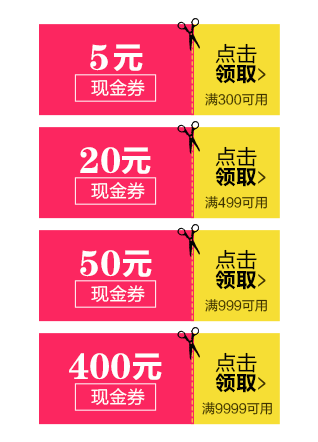
<style>
.page{position:relative;width:318px;height:442px;background:#ffffff}
.page>*{position:absolute;margin:0}
.t1{font:7px "FZLTHJW--GB1-0";letter-spacing:0.2em}
.t2{font:36.9px "FZCSJW--GB1-0";color:#fefefd}
.t3{font:31px "FZLTCHJW--GB1-0";color:#fefefd}
.t4{font:21.1px "FZLTHK--GBK1-0";color:#040404}
.t5{font:21.1px "FZLTCHJW--GB1-0";color:#010101}
.t6{font:18px "FZLTHK--GBK1-0";color:#fefefd}
.t7{font:13px "FZLTHK--GBK1-0";color:#3f3301}
</style>
<div class="page">
<p class="t1" style="left:191px;top:25px;width:2px;height:89px;rotate:90deg">---------------</p>
<p class="t2" style="left:90px;top:44px;width:18px;height:27px">5</p>
<p class="t3" style="left:113px;top:44px;width:30px;height:27px">元</p>
<p class="t4" style="left:215px;top:43px;width:42px;height:21px">点击</p>
<p class="t5" style="left:215px;top:64px;width:42px;height:20px">领取</p>
<p class="t6" style="left:91px;top:79px;width:54px;height:18px">现金券</p>
<p class="t7" style="left:205px;top:93px;width:62px;height:13px">满300可用</p>
<p class="t1" style="left:191px;top:128px;width:2px;height:89px;rotate:90deg">---------------</p>
<p class="t2" style="left:80px;top:147px;width:40px;height:27px">20</p>
<p class="t3" style="left:121px;top:147px;width:30px;height:27px">元</p>
<p class="t4" style="left:215px;top:146px;width:42px;height:21px">点击</p>
<p class="t5" style="left:215px;top:167px;width:42px;height:20px">领取</p>
<p class="t6" style="left:91px;top:182px;width:54px;height:18px">现金券</p>
<p class="t7" style="left:205px;top:196px;width:62px;height:13px">满499可用</p>
<p class="t1" style="left:191px;top:231px;width:2px;height:89px;rotate:90deg">---------------</p>
<p class="t2" style="left:80px;top:250px;width:40px;height:27px">50</p>
<p class="t3" style="left:122px;top:250px;width:30px;height:27px">元</p>
<p class="t4" style="left:215px;top:249px;width:42px;height:21px">点击</p>
<p class="t5" style="left:215px;top:270px;width:42px;height:20px">领取</p>
<p class="t6" style="left:91px;top:285px;width:54px;height:18px">现金券</p>
<p class="t7" style="left:205px;top:299px;width:62px;height:13px">满999可用</p>
<p class="t1" style="left:191px;top:334px;width:2px;height:89px;rotate:90deg">---------------</p>
<p class="t2" style="left:69px;top:353px;width:61px;height:27px">400</p>
<p class="t3" style="left:132px;top:353px;width:30px;height:27px">元</p>
<p class="t4" style="left:215px;top:352px;width:42px;height:21px">点击</p>
<p class="t5" style="left:215px;top:373px;width:42px;height:20px">领取</p>
<p class="t6" style="left:91px;top:388px;width:54px;height:18px">现金券</p>
<p class="t7" style="left:202px;top:402px;width:70px;height:13px">满9999可用</p>
</div>
